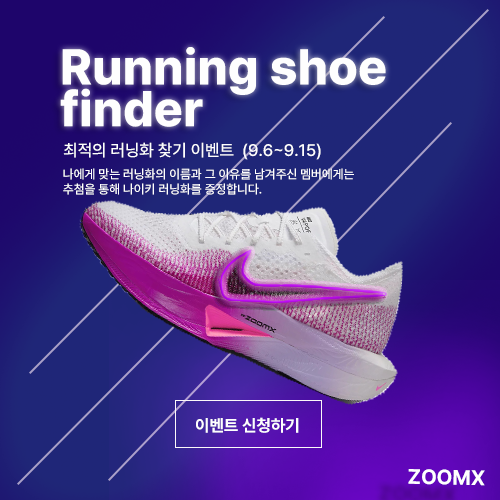
<style>
.page{position:relative;width:500px;height:500px}
.page>*{position:absolute;margin:0}
.t1{font:50px/41.7px "Pretendard-ExtraBold";color:#fefefe}
.t2{font:16.7px "Pretendard-Medium";color:#fefefe}
.t3{font:12.5px "Pretendard-Medium";color:#ffffff}
.t4{font:16.7px "Pretendard-Bold";color:#fefefe}
.t5{font:20.8px "Pretendard-Bold";color:#ffffff}
</style>
<div class="page">
<p class="t1" style="left:60px;top:47px;width:326px;height:80px">Running shoe <br>finder</p>
<p class="t2" style="left:63px;top:142px;width:258px;height:18px">최적의 러닝화 찾기 이벤트  (9.6~9.15)</p>
<p class="t3" style="left:63px;top:168px;width:291px;height:27px">나에게 맞는 러닝화의 이름과 그 이유를 남겨주신 멤버에게는<br>추첨을 통해 나이키 러닝화를 증정합니다.</p>
<p class="t4" style="left:196px;top:417px;width:103px;height:16px">이벤트 신청하기</p>
<p class="t5" style="left:408px;top:469px;width:77px;height:17px;rotate:1deg">ZOOMX</p>
</div>
